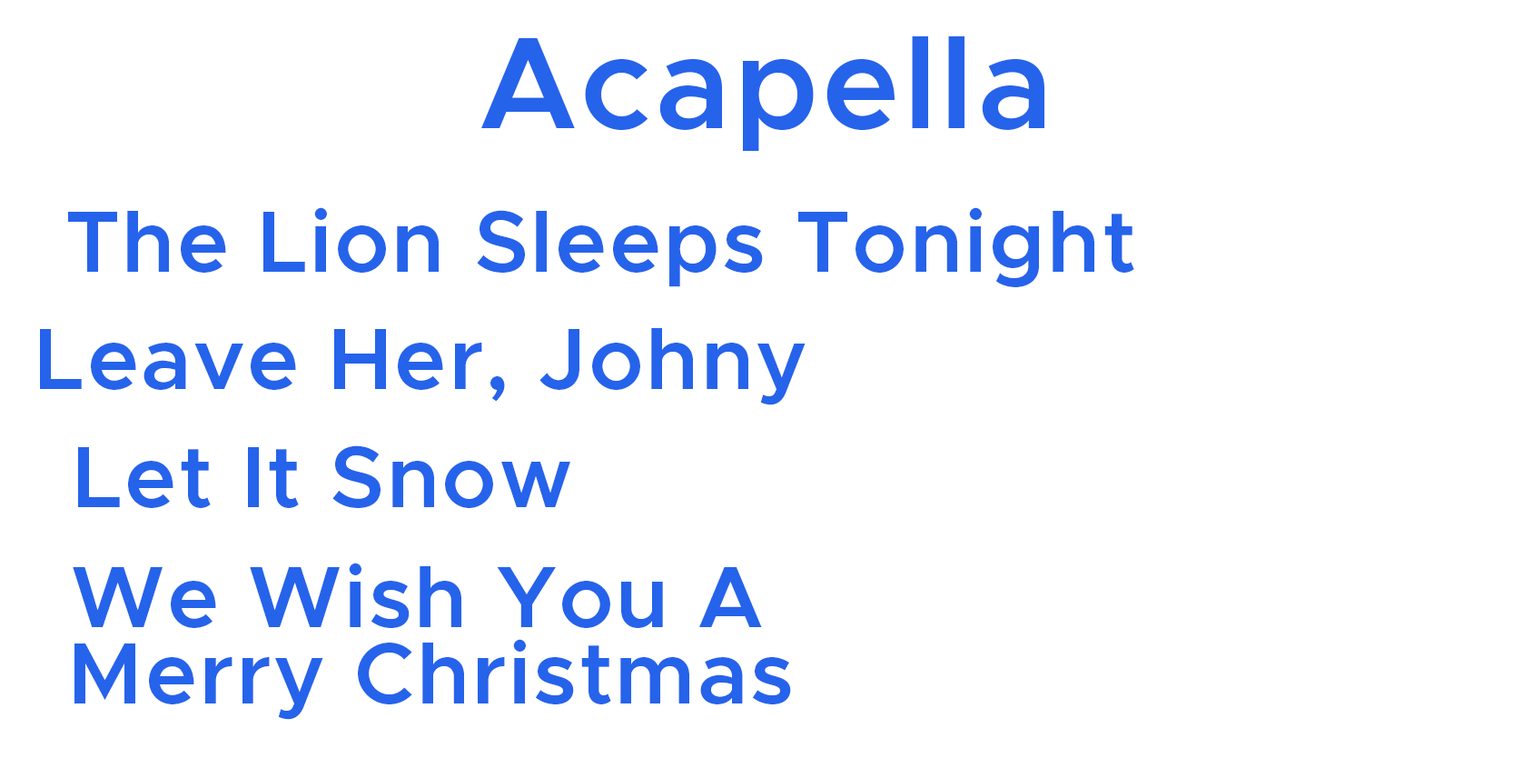
<style>
.page{position:relative;width:1533px;height:778px;background:#ffffff}
.page>*{position:absolute;margin:0}
.t1{font:130.8px "Metropolis-SemiBold";letter-spacing:0.025em;color:#2563eb}
.t2{font:87.2px "Metropolis-SemiBold";letter-spacing:0.025em;color:#2563eb}
.t3{font:87.2px/12.7px "Metropolis-SemiBold";letter-spacing:0.025em;color:#2563eb}
</style>
<div class="page">
<p class="t1" style="left:481px;top:36px;width:564px;height:116px">Acapella</p>
<p class="t2" style="left:68px;top:207px;width:1067px;height:80px">The Lion Sleeps Tonight</p>
<p class="t2" style="left:40px;top:328px;width:766px;height:77px">Leave Her, Johny</p>
<p class="t2" style="left:78px;top:445px;width:492px;height:63px">Let It Snow</p>
<p class="t3" style="left:73px;top:562px;width:718px;height:157px;text-align:center">We Wish You A <br><br><br><br><br><br>Merry Christmas</p>
</div>
